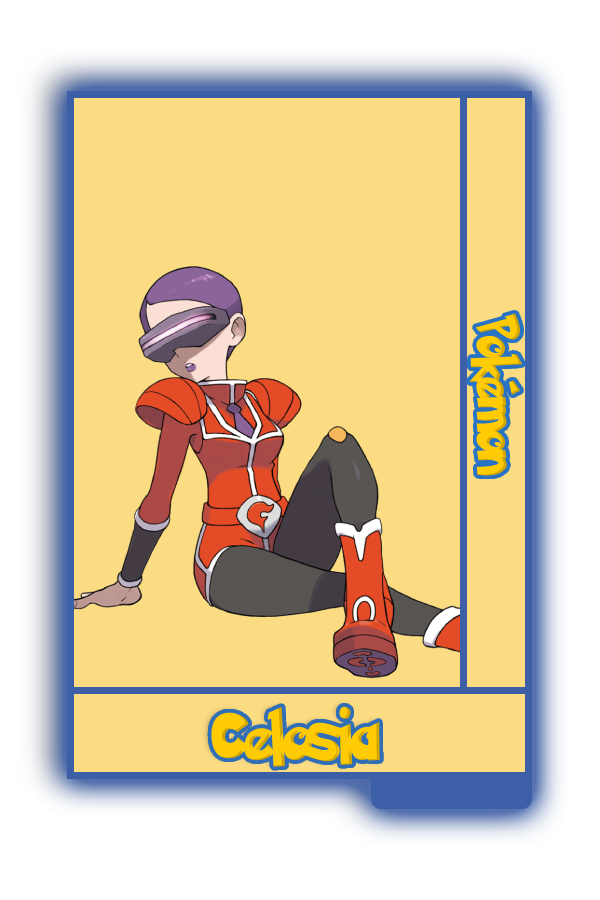
<style>
.page{position:relative;width:600px;height:900px;background:#fbdc83}
.page>*{position:absolute;margin:0}
.t1{font:48.8px "PokemonSolidNormal";color:#ffcb05;scale:0.8 1}
.t2{font:56.6px "PokemonSolidNormal";color:#ffcb05;scale:0.92 1}
</style>
<div class="page">
<p class="t1" style="left:469px;top:313px;width:54px;height:163px;rotate:90deg">Pokémon</p>
<p class="t2" style="left:211px;top:706px;width:169px;height:61px">Celosia</p>
</div>
